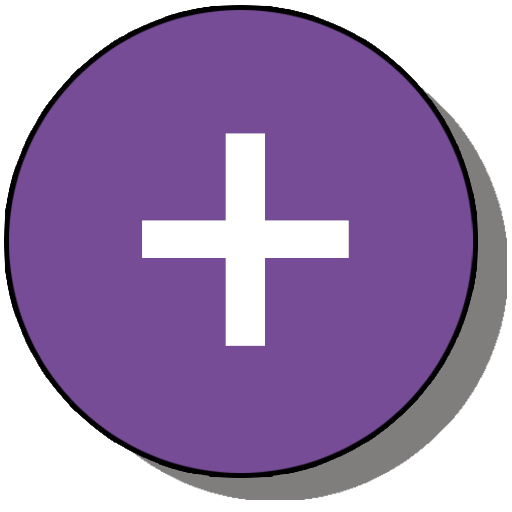
<style>
.page{position:relative;width:512px;height:512px;background:#774c97}
.page>*{position:absolute;margin:0}
.t1{font:399.1px "MyriadPro-Bold";color:#ffffff}
</style>
<div class="page">
<p class="t1" style="left:142px;top:133px;width:207px;height:213px">+</p>
</div>
